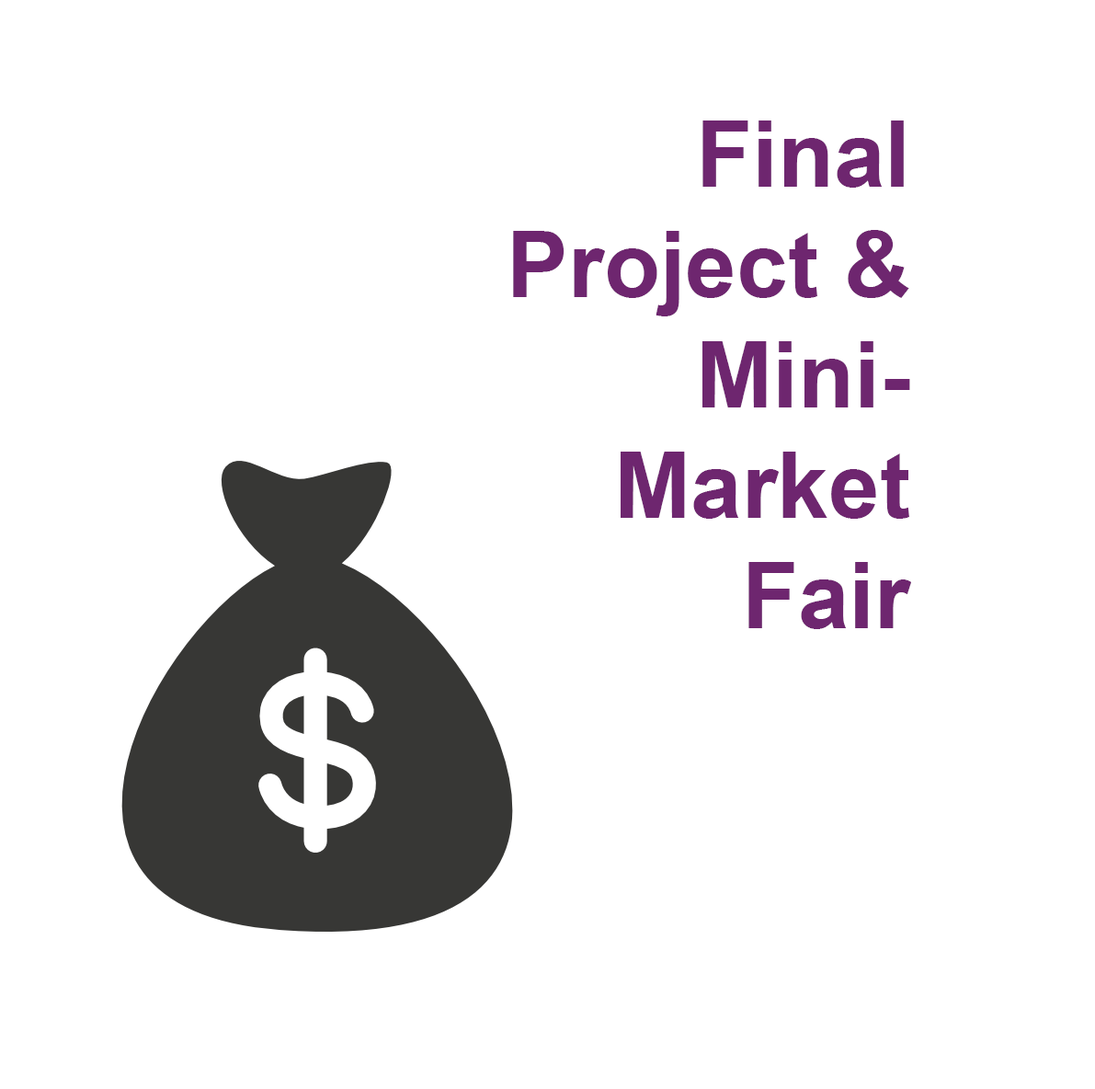
<style>
.page{position:relative;width:1095px;height:1089px;background:#ffffff}
.page>*{position:absolute;margin:0}
.t1{font:92px "Arial-BoldMT";color:#6e266f}
</style>
<div class="page">
<p class="t1" style="left:513px;top:120px;width:398px;height:509px;text-align:right">Final<br>Project &amp;<br>Mini-<br>Market<br>Fair</p>
</div>
